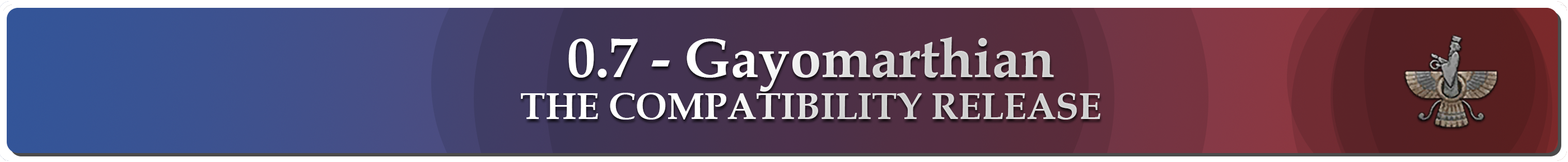
<style>
.page{position:relative;width:1568px;height:162px}
.page>*{position:absolute;margin:0}
.t1{font:37.3px/42px "BookAntiqua-Bold"}
.t2{font:56px "BookAntiqua-Bold"}
</style>
<div class="page">
<p class="t1" style="left:521px;top:37px;width:579px;height:83px;text-align:center"><span class="t2">0.7 - Gayomarthian<br></span>THE COMPATIBILITY RELEASE</p>
</div>
